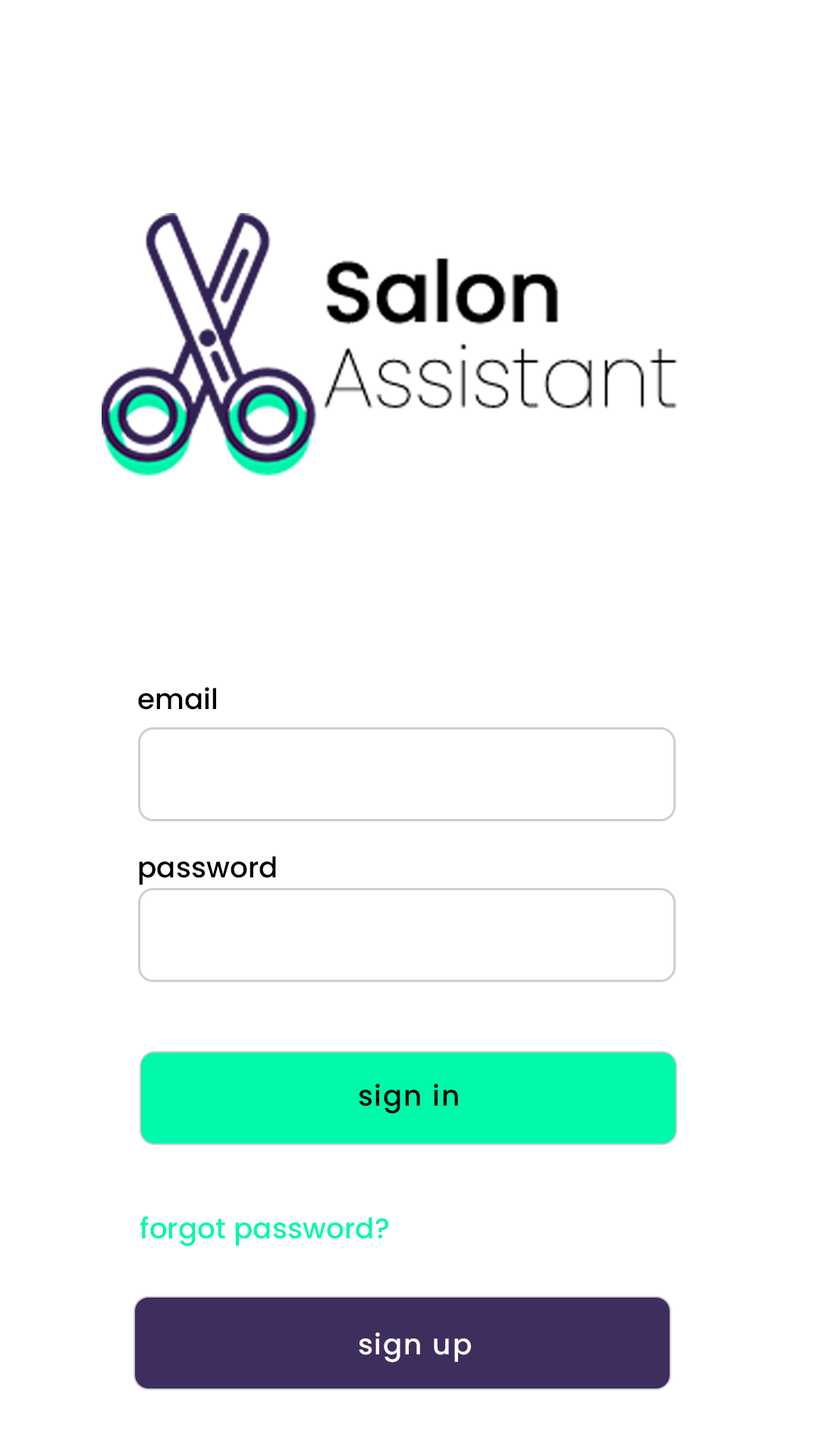
<style>
.page{position:relative;width:819px;height:1456px;background:#ffffff}
.page>*{position:absolute;margin:0}
.t1{font:28.4px "Poppins-Medium";color:#000000}
.t2{font:28.4px "Poppins-Medium";letter-spacing:0.05em;color:#000000}
.t3{font:28.4px "Poppins-Medium";color:#00f8ab}
.t4{font:28.4px "Poppins-Medium";letter-spacing:0.05em;color:#ffffff}
</style>
<div class="page">
<p class="t1" style="left:138px;top:687px;width:78px;height:23px">email</p>
<p class="t1" style="left:139px;top:856px;width:137px;height:29px">password</p>
<p class="t2" style="left:359px;top:1084px;width:99px;height:30px">sign in</p>
<p class="t3" style="left:140px;top:1216px;width:249px;height:31px">forgot password?</p>
<p class="t4" style="left:359px;top:1332px;width:112px;height:31px">sign up</p>
</div>
